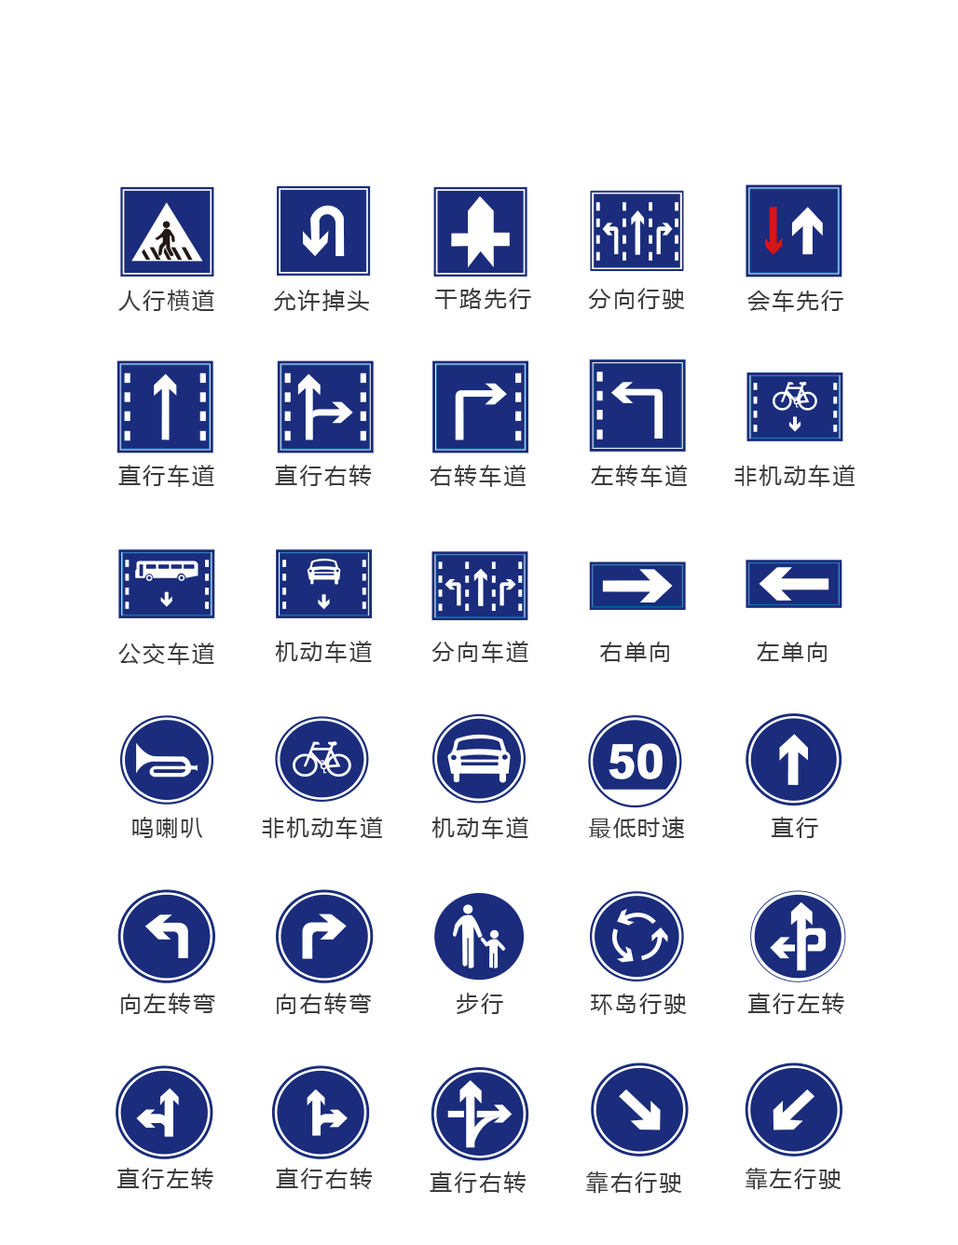
<style>
.page{position:relative;width:958px;height:1245px;background:#ffffff}
.page>*{position:absolute;margin:0}
.t1{font:22.4px "MicrosoftYaHei";letter-spacing:0.1em;color:#3d3d3d}
</style>
<div class="page">
<p class="t1" style="left:118px;top:290px;width:96px;height:21px">人行横道</p>
<p class="t1" style="left:273px;top:290px;width:96px;height:21px">允许掉头</p>
<p class="t1" style="left:434px;top:288px;width:97px;height:21px">干路先行</p>
<p class="t1" style="left:588px;top:288px;width:97px;height:21px">分向行驶</p>
<p class="t1" style="left:747px;top:290px;width:96px;height:22px">会车先行</p>
<p class="t1" style="left:118px;top:465px;width:96px;height:22px">直行车道</p>
<p class="t1" style="left:275px;top:465px;width:97px;height:21px">直行右转</p>
<p class="t1" style="left:429px;top:465px;width:97px;height:22px">右转车道</p>
<p class="t1" style="left:591px;top:465px;width:96px;height:22px">左转车道</p>
<p class="t1" style="left:734px;top:465px;width:121px;height:22px">非机动车道</p>
<p class="t1" style="left:275px;top:641px;width:97px;height:22px">机动车道</p>
<p class="t1" style="left:431px;top:641px;width:97px;height:22px">分向车道</p>
<p class="t1" style="left:600px;top:642px;width:69px;height:20px">右单向</p>
<p class="t1" style="left:756px;top:642px;width:70px;height:20px">左单向</p>
<p class="t1" style="left:118px;top:643px;width:96px;height:22px">公交车道</p>
<p class="t1" style="left:132px;top:817px;width:70px;height:21px">鸣喇叭</p>
<p class="t1" style="left:262px;top:817px;width:121px;height:22px">非机动车道</p>
<p class="t1" style="left:431px;top:817px;width:97px;height:22px">机动车道</p>
<p class="t1" style="left:588px;top:817px;width:96px;height:21px">最低时速</p>
<p class="t1" style="left:771px;top:817px;width:47px;height:21px">直行</p>
<p class="t1" style="left:121px;top:993px;width:94px;height:21px">向左转弯</p>
<p class="t1" style="left:277px;top:993px;width:94px;height:21px">向右转弯</p>
<p class="t1" style="left:456px;top:993px;width:47px;height:21px">步行</p>
<p class="t1" style="left:591px;top:993px;width:95px;height:22px">环岛行驶</p>
<p class="t1" style="left:748px;top:993px;width:96px;height:21px">直行左转</p>
<p class="t1" style="left:117px;top:1168px;width:96px;height:21px">直行左转</p>
<p class="t1" style="left:276px;top:1168px;width:97px;height:21px">直行右转</p>
<p class="t1" style="left:745px;top:1168px;width:96px;height:22px">靠左行驶</p>
<p class="t1" style="left:429px;top:1172px;width:97px;height:21px">直行右转</p>
<p class="t1" style="left:586px;top:1172px;width:96px;height:22px">靠右行驶</p>
</div>
